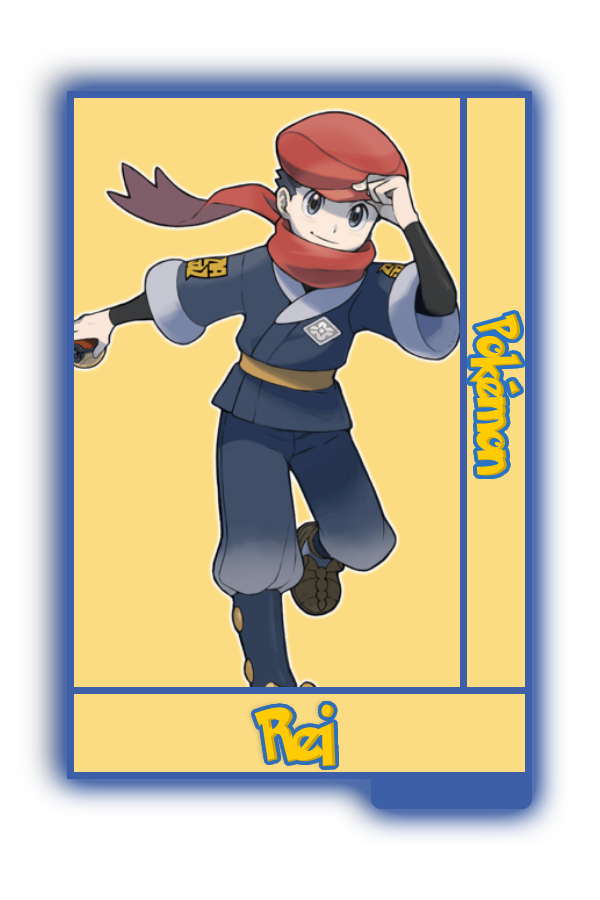
<style>
.page{position:relative;width:600px;height:900px;background:#fbdc83}
.page>*{position:absolute;margin:0}
.t1{font:48.8px "PokemonSolidNormal";color:#ffcb05;scale:0.8 1}
.t2{font:60.1px "PokemonSolidNormal";color:#ffcb05;scale:0.96 1}
</style>
<div class="page">
<p class="t1" style="left:469px;top:313px;width:54px;height:163px;rotate:90deg">Pokémon</p>
<p class="t2" style="left:254px;top:704px;width:82px;height:63px">Rei</p>
</div>
